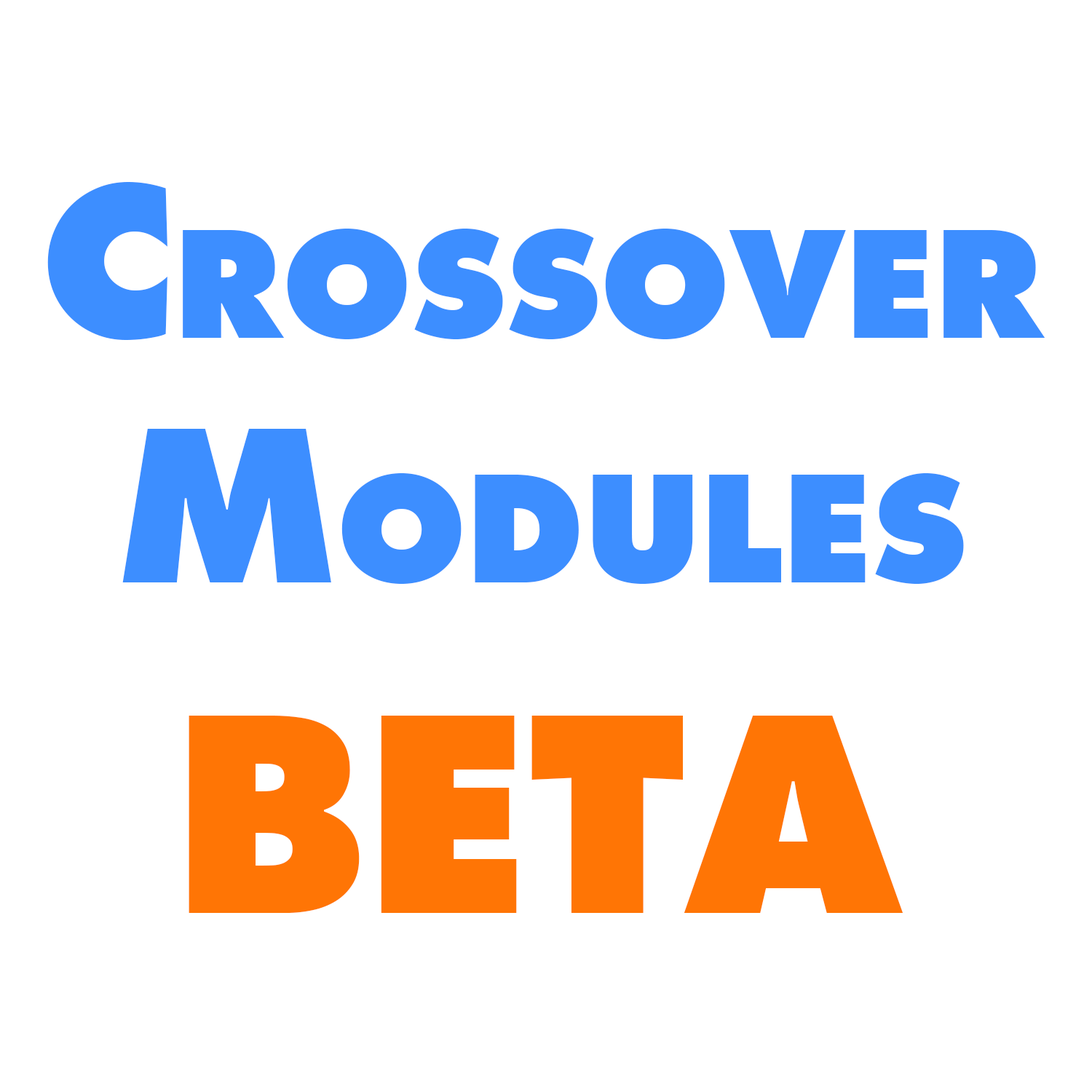
<style>
.page{position:relative;width:1092px;height:1092px;background:#ffffff}
.page>*{position:absolute;margin:0}
.t1{font:203.8px "Futura-ExtraBold";color:#3d8eff;font-variant:small-caps}
.t2{font:262.1px "Futura-ExtraBold";color:#ff7505;font-variant:small-caps}
</style>
<div class="page">
<p class="t1" style="left:47px;top:182px;width:998px;height:402px;text-align:center">Crossover<br>Modules</p>
<p class="t2" style="left:189px;top:716px;width:714px;height:197px">BETA</p>
</div>
